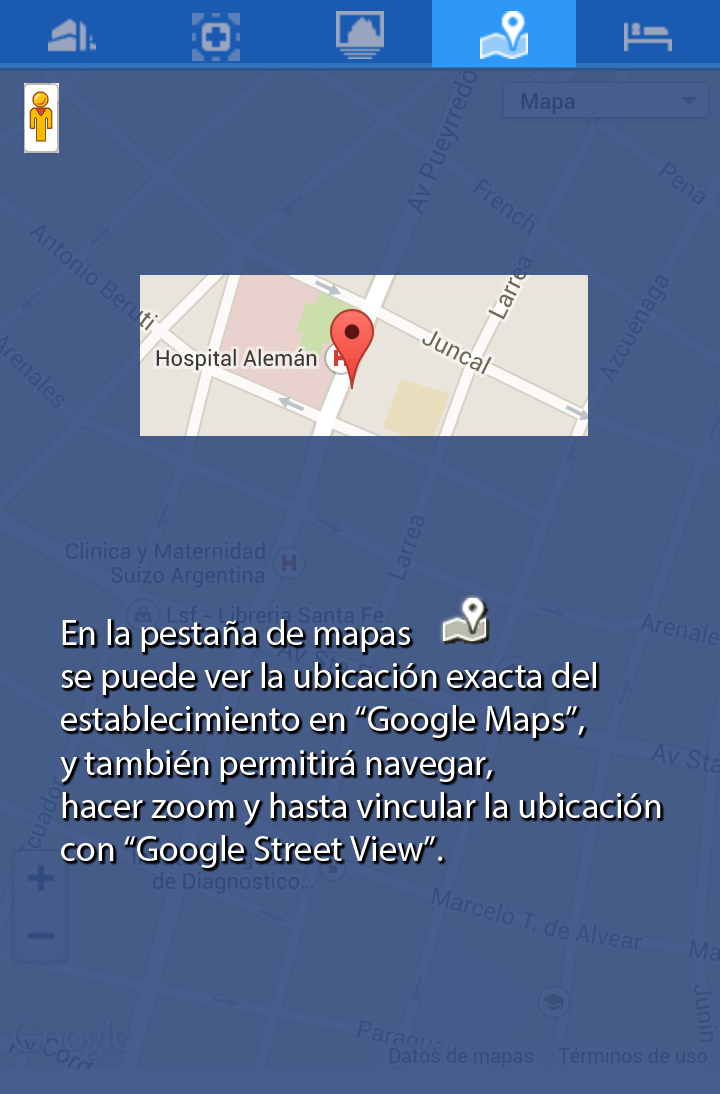
<style>
.page{position:relative;width:720px;height:1094px;background:#455b88}
.page>*{position:absolute;margin:0}
.t1{font:36px "MyriadPro-Regular";color:#ffffff}
</style>
<div class="page">
<p class="t1" style="left:60px;top:619px;width:601px;height:249px">En la pestaña de mapas<br>se puede ver la ubicación exacta del<br>establecimiento en “Google Maps”,<br>y también permitirá navegar,<br>hacer zoom y hasta vincular la ubicación<br>con “Google Street View”.</p>
</div>
